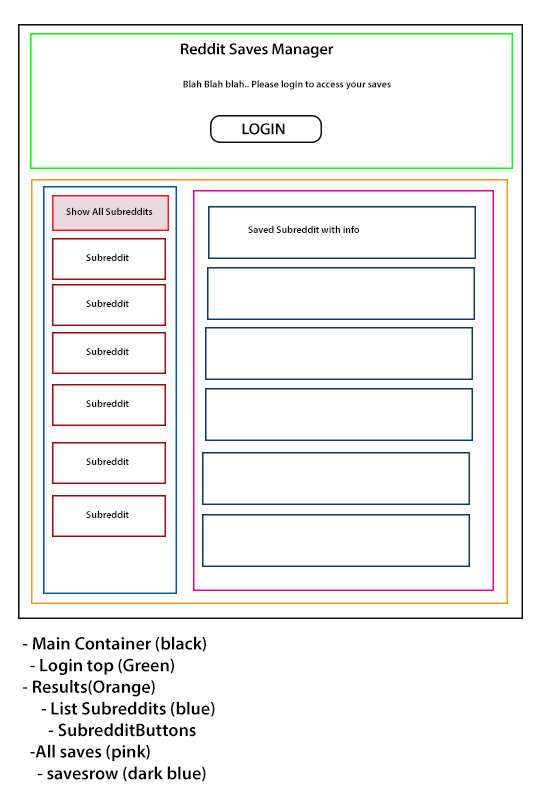
<style>
.page{position:relative;width:550px;height:800px;background:#ffffff}
.page>*{position:absolute;margin:0}
.t1{font:16px "MyriadPro-Semibold";color:#000000}
.t2{font:10px "MyriadPro-Semibold";color:#000000}
.t3{font:18px "MyriadPro-Semibold";color:#000000}
</style>
<div class="page">
<p class="t1" style="left:181px;top:43px;width:153px;height:15px">Reddit Saves Manager</p>
<p class="t2" style="left:183px;top:80px;width:208px;height:10px">Blah Blah blah.. Please login to access your saves</p>
<p class="t2" style="left:66px;top:207px;width:87px;height:8px">Show All Subreddits</p>
<p class="t2" style="left:248px;top:225px;width:112px;height:8px">Saved Subreddit with info</p>
<p class="t3" style="left:22px;top:636px;width:193px;height:146px">- Main Container (black)<br>  - Login top (Green)<br>- Results(Orange)<br>     - List Subreddits (blue)<br>       - SubredditButtons<br>  -All saves (pink)<br>    - savesrow (dark blue)</p>
</div>
